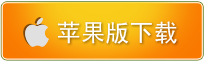
<style>
.page{position:relative;width:205px;height:61px}
.page>*{position:absolute;margin:0}
.t1{font:24.3px "SimHei";color:#ffffff}
</style>
<div class="page">
<p class="t1" style="left:57px;top:21px;width:120px;height:23px">苹果版下载</p>
</div>
